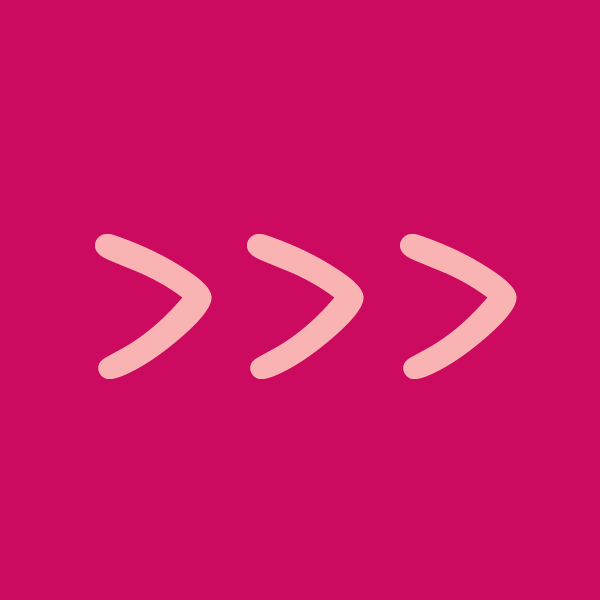
<style>
.page{position:relative;width:600px;height:600px;background:#cc0b60}
.page>*{position:absolute;margin:0}
.t1{font:265.5px "KristenITC-Regular";color:#fab3b3;scale:1.04 1}
</style>
<div class="page">
<p class="t1" style="left:95px;top:233px;width:422px;height:146px">&gt;&gt;&gt;</p>
</div>
